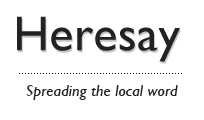
<style>
.page{position:relative;width:204px;height:120px;background:#ffffff}
.page>*{position:absolute;margin:0}
.t1{font:49.2px "GillSans";letter-spacing:0.01em;color:#222222}
.t2{font:16px "GillSans-Italic";letter-spacing:0.01em;color:#222222}
</style>
<div class="page">
<p class="t1" style="left:17px;top:16px;width:163px;height:46px">Heresay</p>
<p class="t2" style="left:26px;top:85px;width:152px;height:15px">Spreading the local word</p>
</div>
